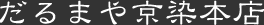
<style>
.page{position:relative;width:264px;height:25px;background:#333333}
.page>*{position:absolute;margin:0}
.t1{font:34px "DFLeiSho-SB-MP-RKSJ-H";color:#ffffff}
</style>
<div class="page">
<p class="t1" style="left:0px;top:0px;width:264px;height:25px">だるまや京染本店</p>
</div>
